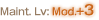
<style>
.page{position:relative;width:99px;height:20px;background:#ffffff}
.page>*{position:absolute;margin:0}
.t1{font:10px "GothicMB101Pro-DeBold";letter-spacing:-0.04em;color:#cc6719}
.t2{font:14px "GothicMB101Pro-DeBold";letter-spacing:-0.04em;color:#cc6719}
.t3{font:10px "GothicMB101Pro-DeBold";letter-spacing:-0.04em;color:#8b6e51}
</style>
<div class="page">
<p class="t1" style="left:52px;top:4px;width:42px;height:12px">Mod.+<span class="t2">3</span></p>
<p class="t3" style="left:0px;top:7px;width:49px;height:9px;opacity:0.9">Maint. Lv:</p>
</div>
